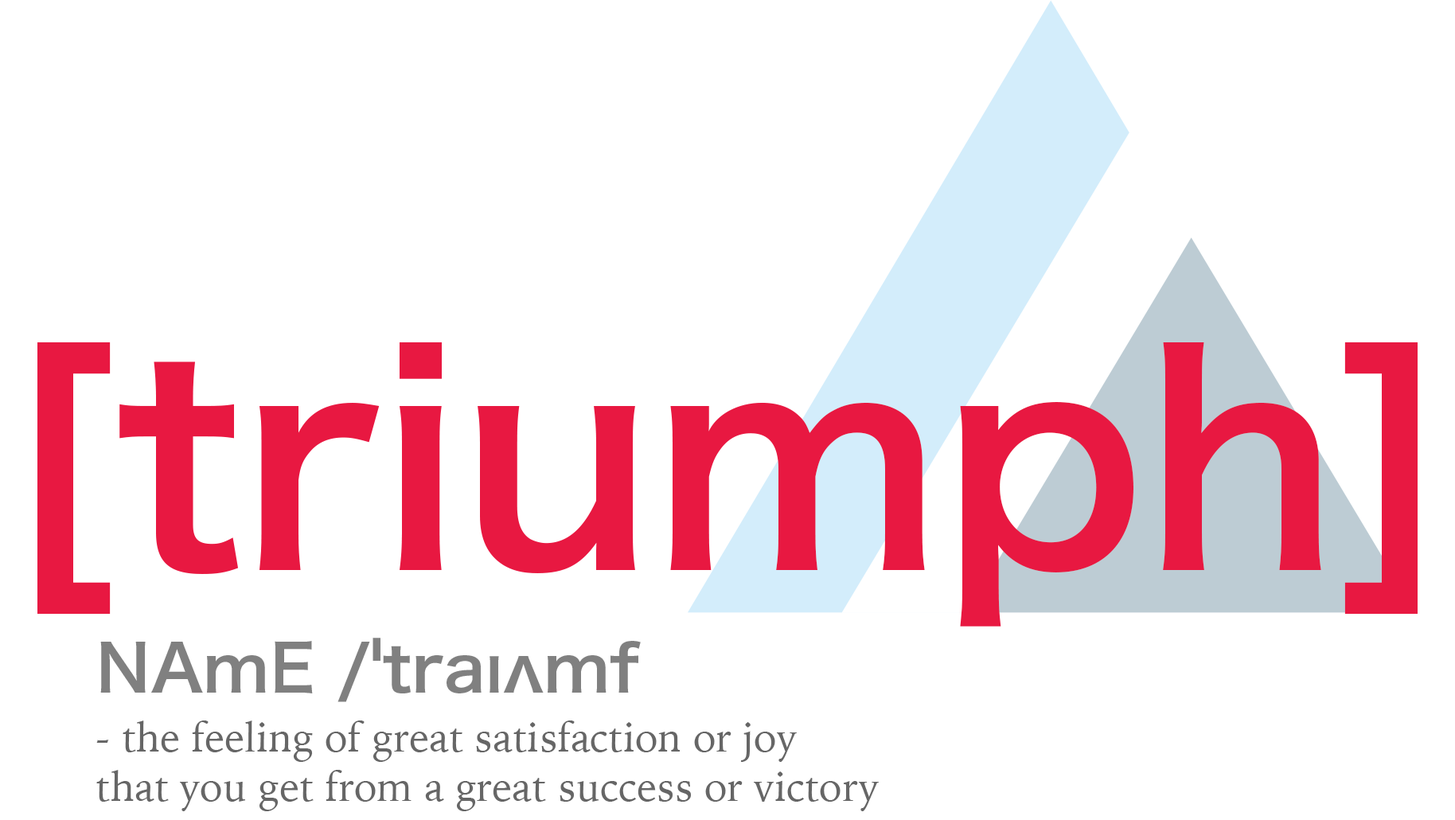
<style>
.page{position:relative;width:1455px;height:820px;background:#ffffff}
.page>*{position:absolute;margin:0}
.t1{font:286.5px "HiraKakuProN-W6";color:#e81841}
.t2{font:63.5px "HiraKakuProN-W6";color:#808080;scale:1.04 1}
.t3{font:40.9px "IowanOldStyle-Roman";color:#666666}
</style>
<div class="page">
<p class="t1" style="left:37px;top:342px;width:1380px;height:284px">[triumph]</p>
<p class="t2" style="left:100px;top:637px;width:541px;height:65px">NAmE /ˈtraɪʌmf</p>
<p class="t3" style="left:96px;top:720px;width:783px;height:91px">- the feeling of great satisfaction or joy <br>that you get from a great success or victory</p>
</div>
